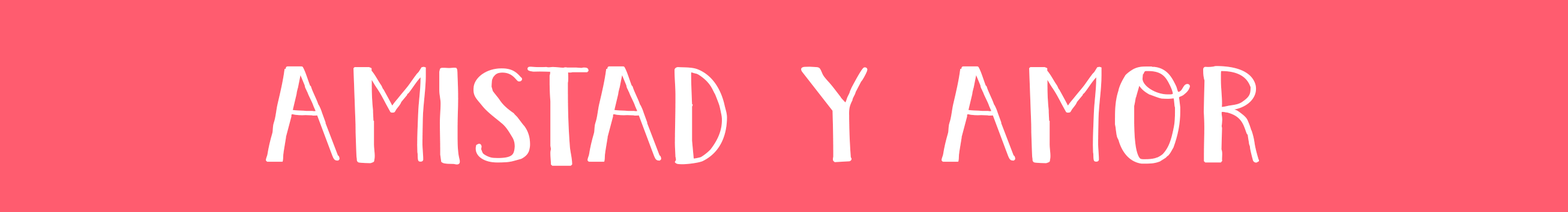
<style>
.page{position:relative;width:1568px;height:212px;background:#ff5c6f}
.page>*{position:absolute;margin:0}
.t1{font:117.4px "DKPastis";color:#ffffff;font-weight:bold;scale:1.58 1}
</style>
<div class="page">
<p class="t1" style="left:266px;top:66px;width:993px;height:100px">amistad y amor</p>
</div>
